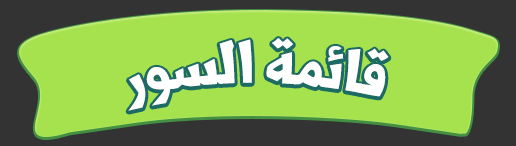
<style>
.page{position:relative;width:516px;height:146px;background:#a5e24d}
.page>*{position:absolute;margin:0}
.t1{font:72px "Shorooq_N1";color:#ffffff}
</style>
<div class="page">
<p class="t1" style="left:128px;top:38px;width:261px;height:73px">قائمة السور</p>
</div>
